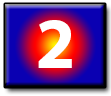
<style>
.page{position:relative;width:111px;height:96px}
.page>*{position:absolute;margin:0}
.t1{font:72px "MyriadPro-Bold";color:#ffffff}
</style>
<div class="page">
<p class="t1" style="left:38px;top:20px;width:34px;height:48px">2</p>
</div>
